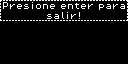
<style>
.page{position:relative;width:128px;height:64px;background:#000000}
.page>*{position:absolute;margin:0}
.t1{font:8px "PixelOperator8";color:#ffffff}
</style>
<div class="page">
<p class="t1" style="left:3px;top:2px;width:122px;height:17px;text-align:center">Presione enter para<br>salir!</p>
</div>
